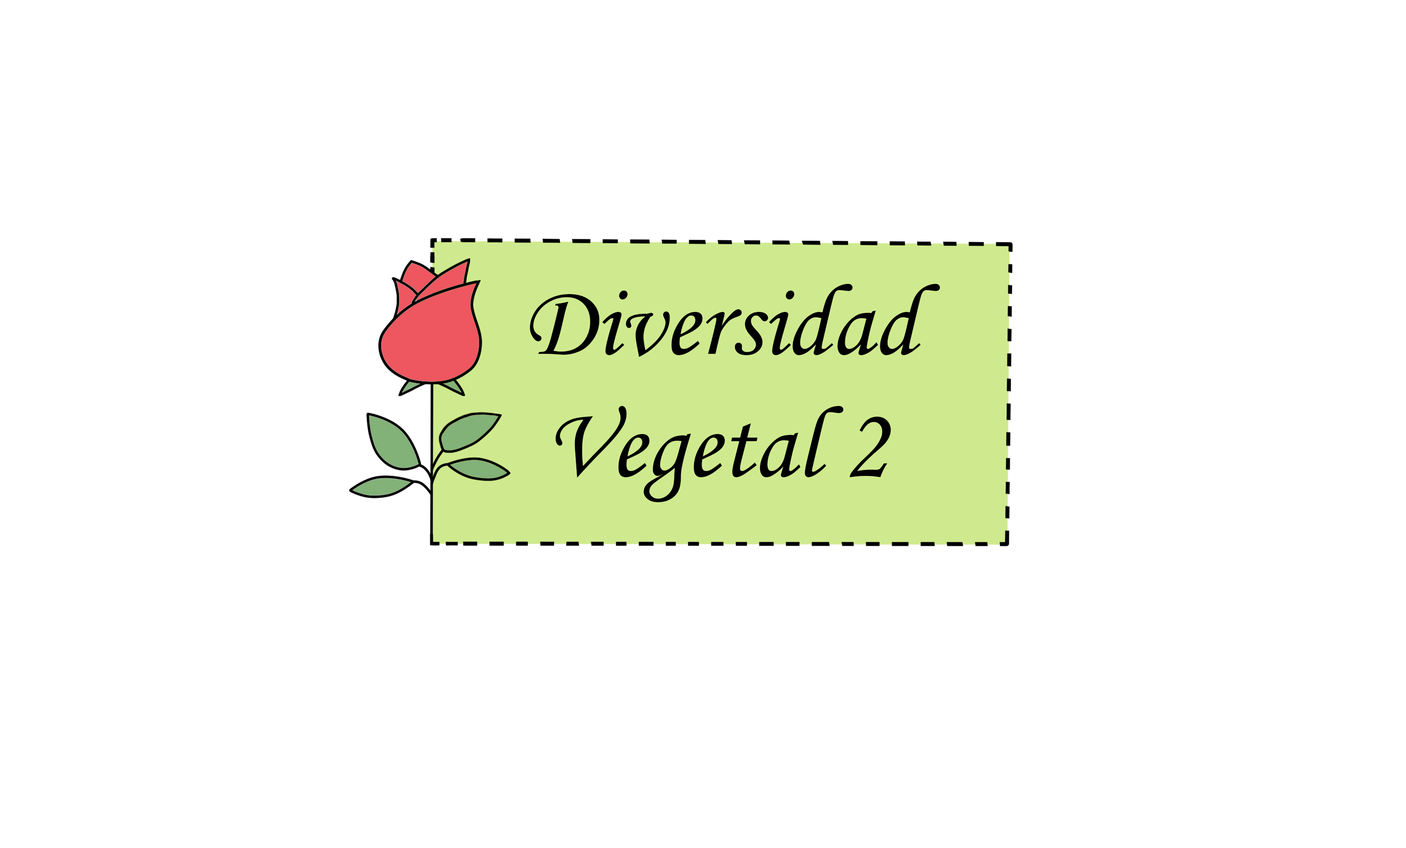
<style>
.page{position:relative;width:1406px;height:848px;background:#ffffff}
.page>*{position:absolute;margin:0}
.t1{font:101.6px "MonotypeCorsiva";color:#000000}
</style>
<div class="page">
<p class="t1" style="left:530px;top:284px;width:410px;height:218px">Diversidad<br> Vegetal 2</p>
</div>
